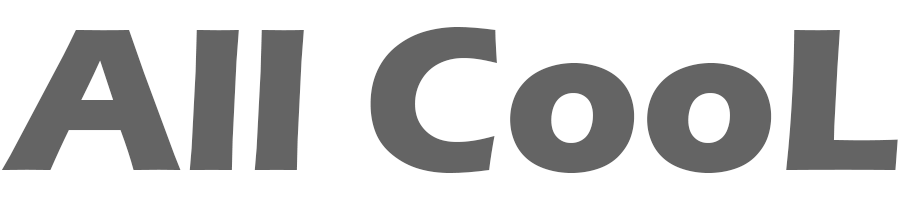
<style>
.page{position:relative;width:900px;height:200px;background:#ffffff}
.page>*{position:absolute;margin:0}
.t1{font:210px "ErasITC-Bold";color:#646464}
</style>
<div class="page">
<p class="t1" style="left:1px;top:27px;width:897px;height:146px">All CooL</p>
</div>
